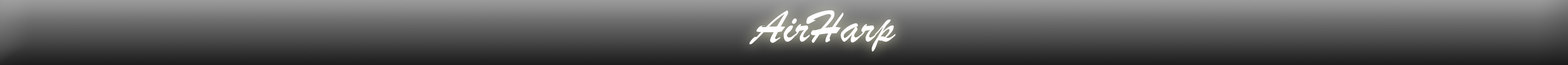
<style>
.page{position:relative;width:1568px;height:65px}
.page>*{position:absolute;margin:0}
.t1{font:49px "BrushScriptMT";color:#ffffff}
</style>
<div class="page">
<p class="t1" style="left:749px;top:10px;width:147px;height:42px">AirHarp</p>
</div>
